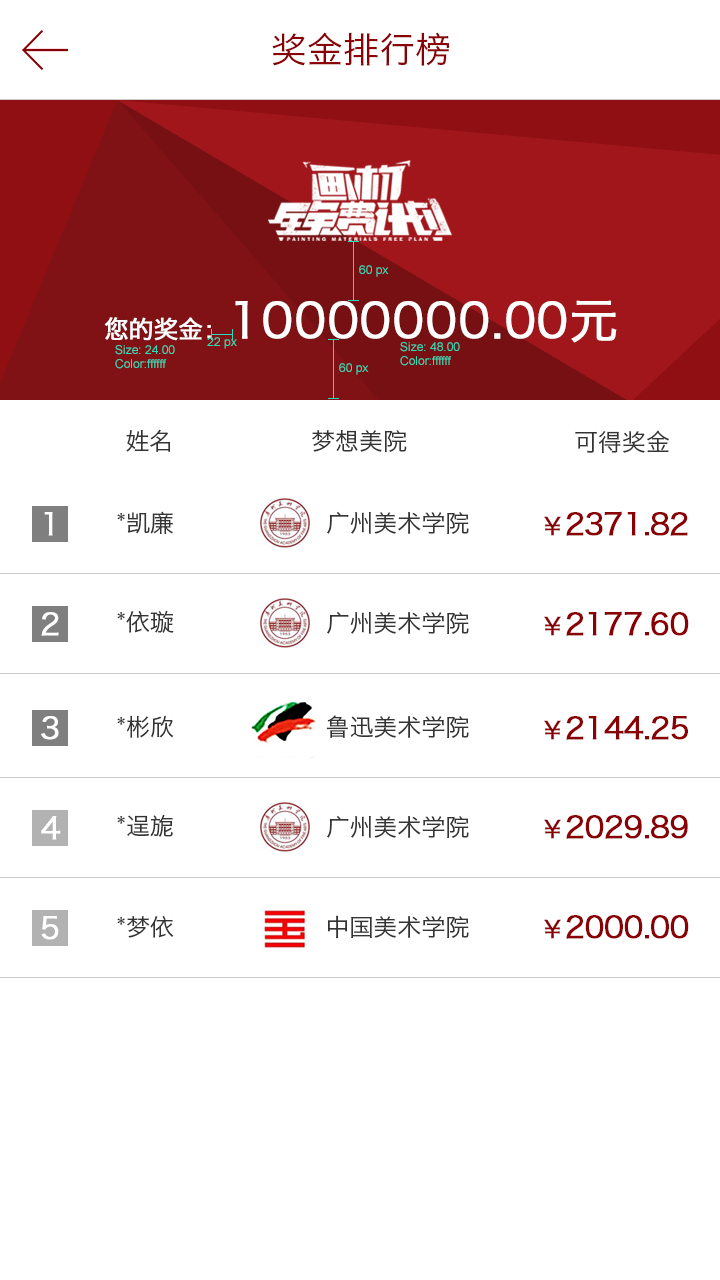
<style>
.page{position:relative;width:720px;height:1280px;background:#ffffff}
.page>*{position:absolute;margin:0}
.t1{font:36px "HiraginoSansGB-W3";color:#8a0105}
.t2{font:12px "ArialMT";color:#28ddb9}
.t3{font:48px "HiraginoSansGB-W3";color:#ffffff;font-weight:bold}
.t4{font:24.2px "HiraginoSansGB-W3";color:#ffffff;font-weight:bold}
.t5{font:24px "HiraginoSansGB-W3";color:#343434}
.t6{font:30px "HiraginoSansGB-W3";color:#ffffff;font-weight:bold}
.t7{font:30px "HiraginoSansGB-W3";letter-spacing:-0.034em;color:#8a0105;font-weight:bold}
.t8{font:24px "HiraginoSansGB-W3";letter-spacing:-0.034em;color:#8a0105;font-weight:bold}
</style>
<div class="page">
<p class="t1" style="left:272px;top:32px;width:177px;height:34px">奖金排行榜</p>
<p class="t2" style="left:359px;top:265px;width:30px;height:12px">60 px</p>
<p class="t3" style="left:104px;top:300px;width:513px;height:43px"><span class="t4">您的奖金：</span>10000000.00元</p>
<p class="t2" style="left:207px;top:337px;width:30px;height:12px">22 px</p>
<p class="t2" style="left:400px;top:342px;width:60px;height:24px">Size: 48.00<br>Color:ffffff</p>
<p class="t2" style="left:115px;top:345px;width:60px;height:24px">Size: 24.00<br>Color:ffffff</p>
<p class="t2" style="left:339px;top:363px;width:30px;height:12px">60 px</p>
<p class="t5" style="left:126px;top:429px;width:45px;height:23px">姓名</p>
<p class="t5" style="left:312px;top:430px;width:95px;height:22px">梦想美院</p>
<p class="t5" style="left:575px;top:430px;width:94px;height:23px">可得奖金</p>
<p class="t6" style="left:44px;top:512px;width:9px;height:24px">1</p>
<p class="t5" style="left:117px;top:511px;width:56px;height:23px">*凯廉</p>
<p class="t5" style="left:327px;top:511px;width:142px;height:23px">广州美术学院</p>
<p class="t7" style="left:544px;top:511px;width:144px;height:25px"><span class="t8">￥</span>2371.82</p>
<p class="t6" style="left:41px;top:612px;width:18px;height:24px">2</p>
<p class="t5" style="left:117px;top:610px;width:57px;height:23px">*依璇</p>
<p class="t5" style="left:327px;top:611px;width:142px;height:23px">广州美术学院</p>
<p class="t7" style="left:544px;top:611px;width:145px;height:25px"><span class="t8">￥</span>2177.60</p>
<p class="t6" style="left:41px;top:716px;width:18px;height:24px">3</p>
<p class="t5" style="left:117px;top:715px;width:57px;height:23px">*彬欣</p>
<p class="t5" style="left:326px;top:715px;width:143px;height:23px">鲁迅美术学院</p>
<p class="t7" style="left:544px;top:716px;width:144px;height:24px"><span class="t8">￥</span>2144.25</p>
<p class="t6" style="left:41px;top:816px;width:20px;height:24px">4</p>
<p class="t5" style="left:117px;top:814px;width:56px;height:23px">*逞旎</p>
<p class="t5" style="left:327px;top:815px;width:142px;height:23px">广州美术学院</p>
<p class="t7" style="left:544px;top:815px;width:144px;height:24px"><span class="t8">￥</span>2029.89</p>
<p class="t6" style="left:41px;top:916px;width:18px;height:24px">5</p>
<p class="t5" style="left:117px;top:916px;width:57px;height:22px">*梦依</p>
<p class="t5" style="left:327px;top:915px;width:142px;height:24px">中国美术学院</p>
<p class="t7" style="left:544px;top:915px;width:145px;height:24px"><span class="t8">￥</span>2000.00</p>
</div>
